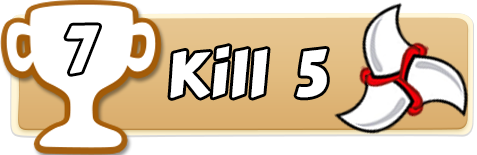
<style>
.page{position:relative;width:477px;height:155px;background:#ffffff}
.page>*{position:absolute;margin:0}
.t1{font:62.2px "CarterOne";color:#ffffff}
</style>
<div class="page">
<p class="t1" style="left:66px;top:25px;width:33px;height:49px">7</p>
<p class="t1" style="left:170px;top:46px;width:157px;height:52px">Kill  5</p>
</div>
